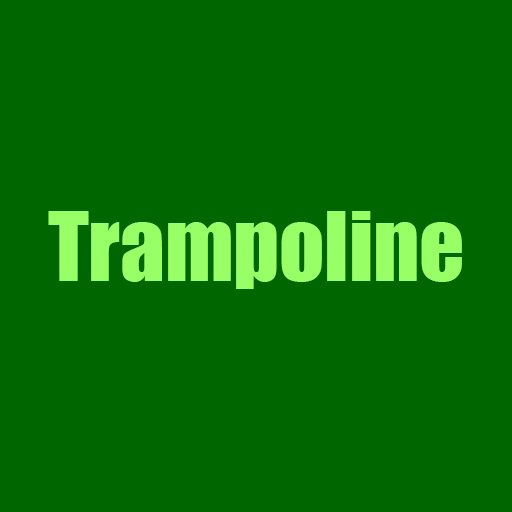
<style>
.page{position:relative;width:512px;height:512px;background:#006600}
.page>*{position:absolute;margin:0}
.t1{font:88.6px "Impact";color:#99ff66}
</style>
<div class="page">
<p class="t1" style="left:48px;top:211px;width:414px;height:78px">Trampoline</p>
</div>
